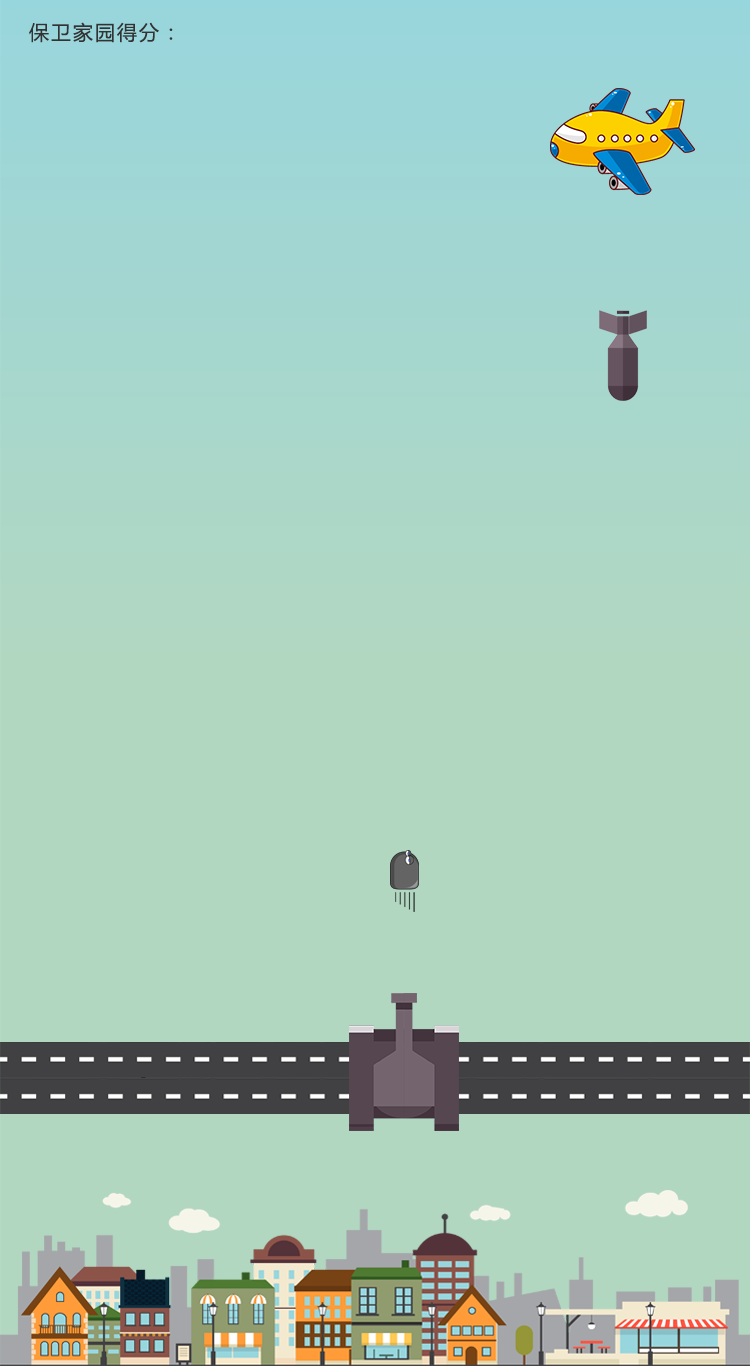
<style>
.page{position:relative;width:750px;height:1366px;background:#b2d7c1}
.page>*{position:absolute;margin:0}
.t1{font:20px "MicrosoftYaHei";letter-spacing:0.1em;color:#333333}
</style>
<div class="page">
<p class="t1" style="left:29px;top:22px;width:144px;height:21px">保卫家园得分：</p>
</div>
